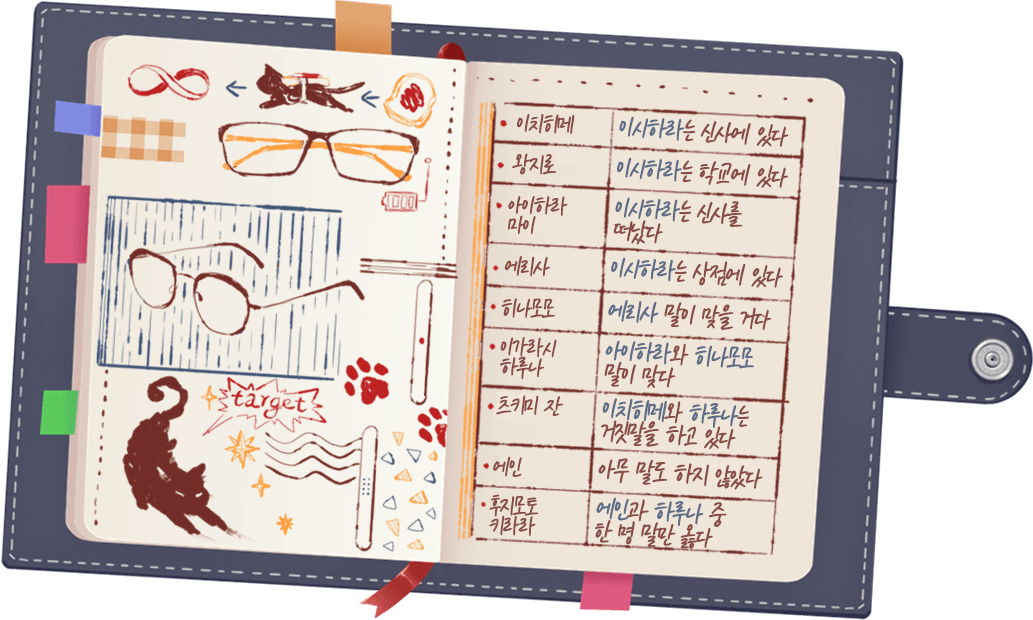
<style>
.page{position:relative;width:1033px;height:620px}
.page>*{position:absolute;margin:0}
.t1{font:27.3px "KCC-eunyoung-Regular";letter-spacing:-0.08em;color:#884d46;font-weight:bold}
.t2{font:30.5px "KCC-eunyoung-Regular";letter-spacing:-0.08em;color:#884d46;font-weight:bold}
.t3{font:30.5px "KCC-eunyoung-Regular";letter-spacing:-0.08em;color:#5f6d87;font-weight:bold}
.t4{font:27.3px/20px "KCC-eunyoung-Regular";letter-spacing:-0.08em;color:#884d46;font-weight:bold}
.t5{font:30.5px/23px "KCC-eunyoung-Regular";letter-spacing:-0.08em;color:#884d46;font-weight:bold}
.t6{font:30.5px/23px "KCC-eunyoung-Regular";letter-spacing:-0.08em;color:#5f6d87;font-weight:bold}
</style>
<div class="page">
<p class="t1" style="left:517px;top:113px;width:58px;height:22px;rotate:2deg">이치히메</p>
<p class="t2" style="left:619px;top:116px;width:170px;height:31px;rotate:3deg"><span class="t3">이시하라</span>는 신사에 있다</p>
<p class="t1" style="left:512px;top:153px;width:45px;height:22px;rotate:2deg">왕지로</p>
<p class="t2" style="left:617px;top:157px;width:172px;height:31px;rotate:3deg"><span class="t3">이시하라</span>는 학교에 있다</p>
<p class="t4" style="left:508px;top:195px;width:60px;height:40px;rotate:2deg">아이하라<br>마이</p>
<p class="t5" style="left:613px;top:197px;width:130px;height:48px;rotate:3deg"><span class="t6">이시하라</span>는 신사를<br>떠났다</p>
<p class="t1" style="left:504px;top:256px;width:46px;height:21px;rotate:2deg">에리사</p>
<p class="t2" style="left:611px;top:257px;width:172px;height:31px;rotate:3deg"><span class="t3">이시하라</span>는 상점에 있다</p>
<p class="t1" style="left:501px;top:298px;width:55px;height:20px;rotate:2deg">히나모모</p>
<p class="t2" style="left:608px;top:300px;width:164px;height:31px;rotate:3deg"><span class="t3">에리사</span> 말이 맞을 거다</p>
<p class="t4" style="left:500px;top:337px;width:57px;height:43px;rotate:2deg">이가라시<br>하루나</p>
<p class="t5" style="left:604px;top:340px;width:150px;height:48px;rotate:3deg"><span class="t6">아이하라</span>와 <span class="t6">히나모모<br></span>말이 맞다</p>
<p class="t1" style="left:496px;top:395px;width:68px;height:22px;rotate:2deg">츠키미 잔</p>
<p class="t5" style="left:601px;top:398px;width:148px;height:52px;rotate:3deg"><span class="t6">이치히메</span>와 <span class="t6">하루나</span>는<br>거짓말을 하고 있다</p>
<p class="t1" style="left:493px;top:456px;width:29px;height:21px;rotate:2deg">에인</p>
<p class="t2" style="left:598px;top:458px;width:165px;height:32px;rotate:3deg">아무 말도 하지 않았다</p>
<p class="t4" style="left:489px;top:494px;width:50px;height:43px;rotate:2deg">후지모토<br>키라라</p>
<p class="t5" style="left:595px;top:497px;width:132px;height:52px;rotate:3deg"><span class="t6">에인</span>과 <span class="t6">하루나 </span>중<br>한 명 말만 옳다</p>
</div>
